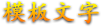
<style>
.page{position:relative;width:102px;height:28px;background:#ffffff}
.page>*{position:absolute;margin:0}
.t1{font:24px "KaiTi";font-weight:bold}
</style>
<div class="page">
<p class="t1" style="left:2px;top:1px;width:97px;height:23px">模板文字</p>
</div>
